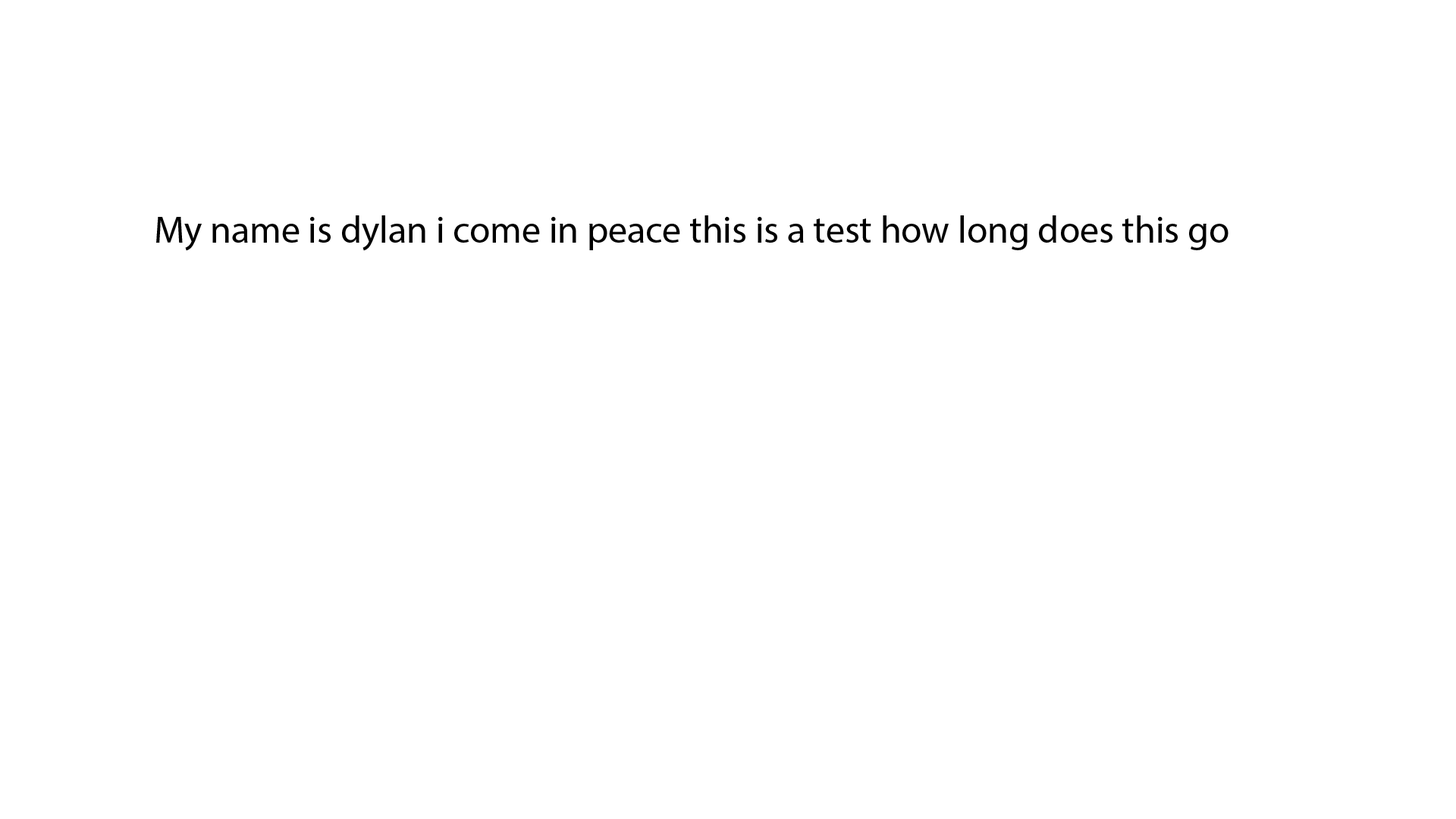
<style>
.page{position:relative;width:1456px;height:819px;background:#ffffff}
.page>*{position:absolute;margin:0}
.t1{font:37.9px "MyriadPro-Regular";color:#000000}
</style>
<div class="page">
<p class="t1" style="left:156px;top:215px;width:1072px;height:36px">My name is dylan i come in peace this is a test how long does this go</p>
</div>
